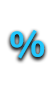
<style>
.page{position:relative;width:54px;height:90px;background:#ffffff}
.page>*{position:absolute;margin:0}
.t1{font:36px "Sarala-Bold";letter-spacing:0.005em;color:#21c6fc}
</style>
<div class="page">
<p class="t1" style="left:10px;top:29px;width:35px;height:30px">%</p>
</div>
